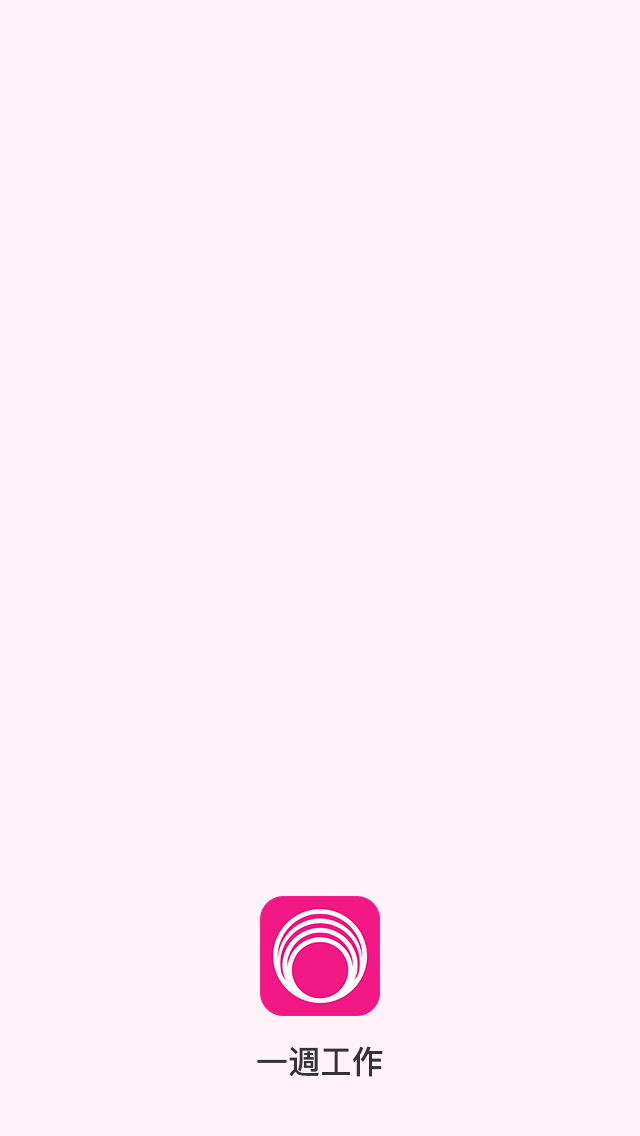
<style>
.page{position:relative;width:640px;height:1136px;background:#fff2f9}
.page>*{position:absolute;margin:0}
.t1{font:32px "PingFang-SC-Bold";color:#333333}
</style>
<div class="page">
<p class="t1" style="left:257px;top:1046px;width:126px;height:31px">一週工作</p>
</div>
